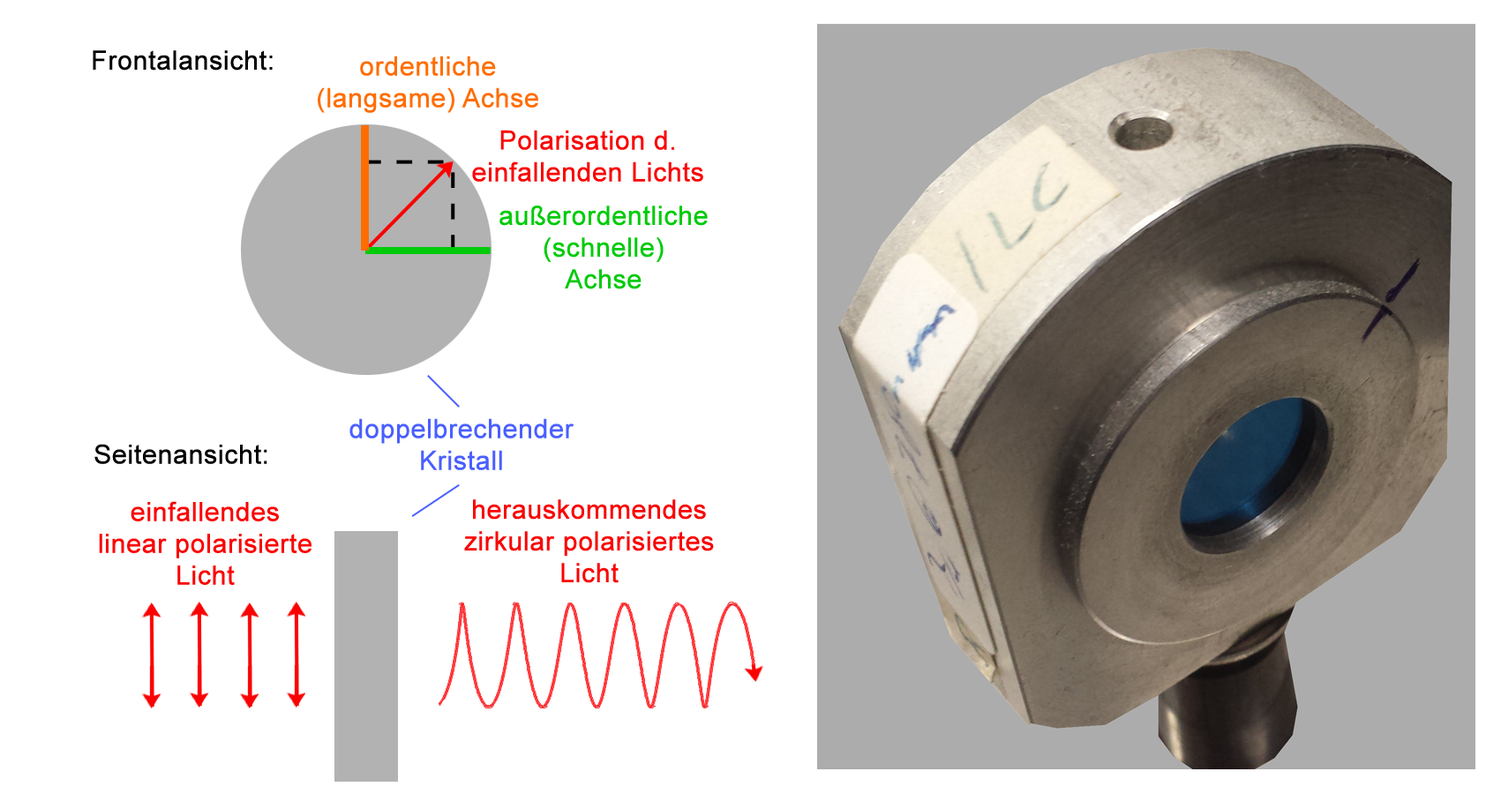
<style>
.page{position:relative;width:1501px;height:794px;background:#ffffff}
.page>*{position:absolute;margin:0}
.t1{font:26.5px "ArialMT";color:#000000;font-weight:bold}
.t2{font:26.5px "ArialMT";color:#ff6d01;font-weight:bold}
.t3{font:26.5px "ArialMT";color:#fa0202;font-weight:bold}
.t4{font:26.5px "ArialMT";color:#00cb0a;font-weight:bold}
.t5{font:26.5px "ArialMT";color:#495fff;font-weight:bold}
</style>
<div class="page">
<p class="t1" style="left:93px;top:50px;width:180px;height:21px">Frontalansicht:</p>
<p class="t2" style="left:318px;top:56px;width:220px;height:57px;text-align:center">ordentliche<br>(langsame) Achse</p>
<p class="t3" style="left:472px;top:130px;width:231px;height:52px;text-align:center">Polarisation d.<br>einfallenden Lichts</p>
<p class="t4" style="left:500px;top:206px;width:208px;height:83px;text-align:center">außerordentliche<br>(schnelle)<br>Achse</p>
<p class="t5" style="left:349px;top:418px;width:225px;height:52px;text-align:center">doppelbrechender<br>Kristall</p>
<p class="t1" style="left:94px;top:444px;width:173px;height:20px">Seitenansicht:</p>
<p class="t3" style="left:99px;top:501px;width:213px;height:84px;text-align:center">einfallendes<br>linear polarisierte<br>Licht</p>
<p class="t3" style="left:464px;top:500px;width:250px;height:83px;text-align:center">herauskommendes<br>zirkular polarisiertes<br>Licht</p>
</div>
